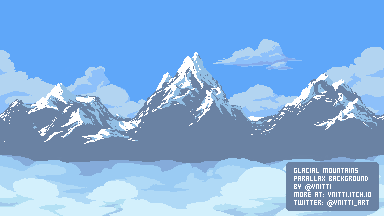
<style>
.page{position:relative;width:384px;height:216px;background:#5fa7f9}
.page>*{position:absolute;margin:0}
.t1{font:7px/8px "PixelGosub";color:#ffffff}
.t2{font:7px/8px "Candara";color:#ffffff}
</style>
<div class="page">
<p class="t1" style="left:294px;top:168px;width:77px;height:39px">Glacial Mountains Parallax Background<br>by <span class="t2">@</span>vnitti<br>more at: vnitti.itch.io<br>twitter: <span class="t2">@</span>vnitti_art</p>
</div>
